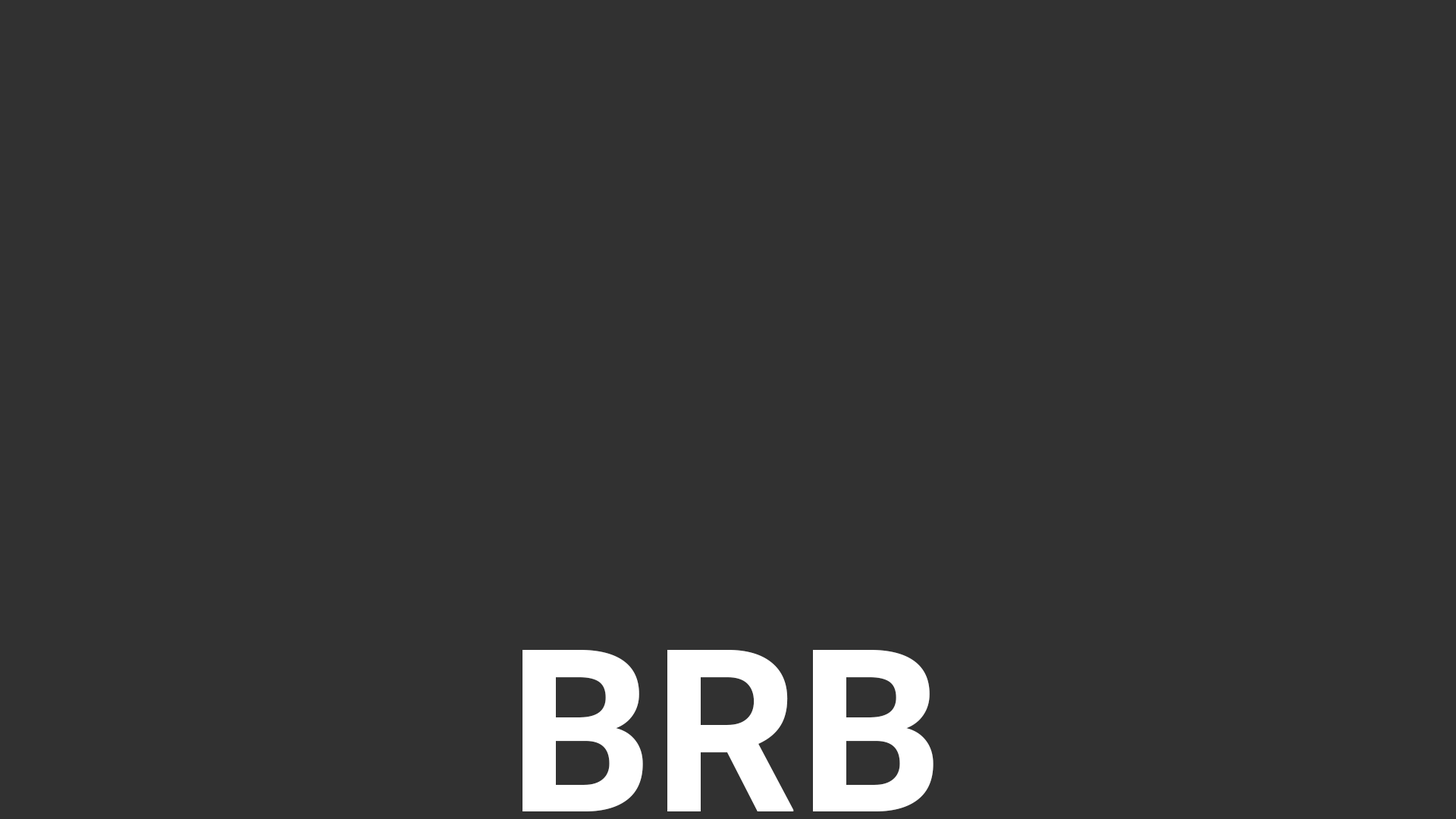
<style>
.page{position:relative;width:1456px;height:819px;background:#313131}
.page>*{position:absolute;margin:0}
.t1{font:227.5px "Roboto-Bold";color:#ffffff}
</style>
<div class="page">
<p class="t1" style="left:522px;top:650px;width:411px;height:161px">BRB</p>
</div>
